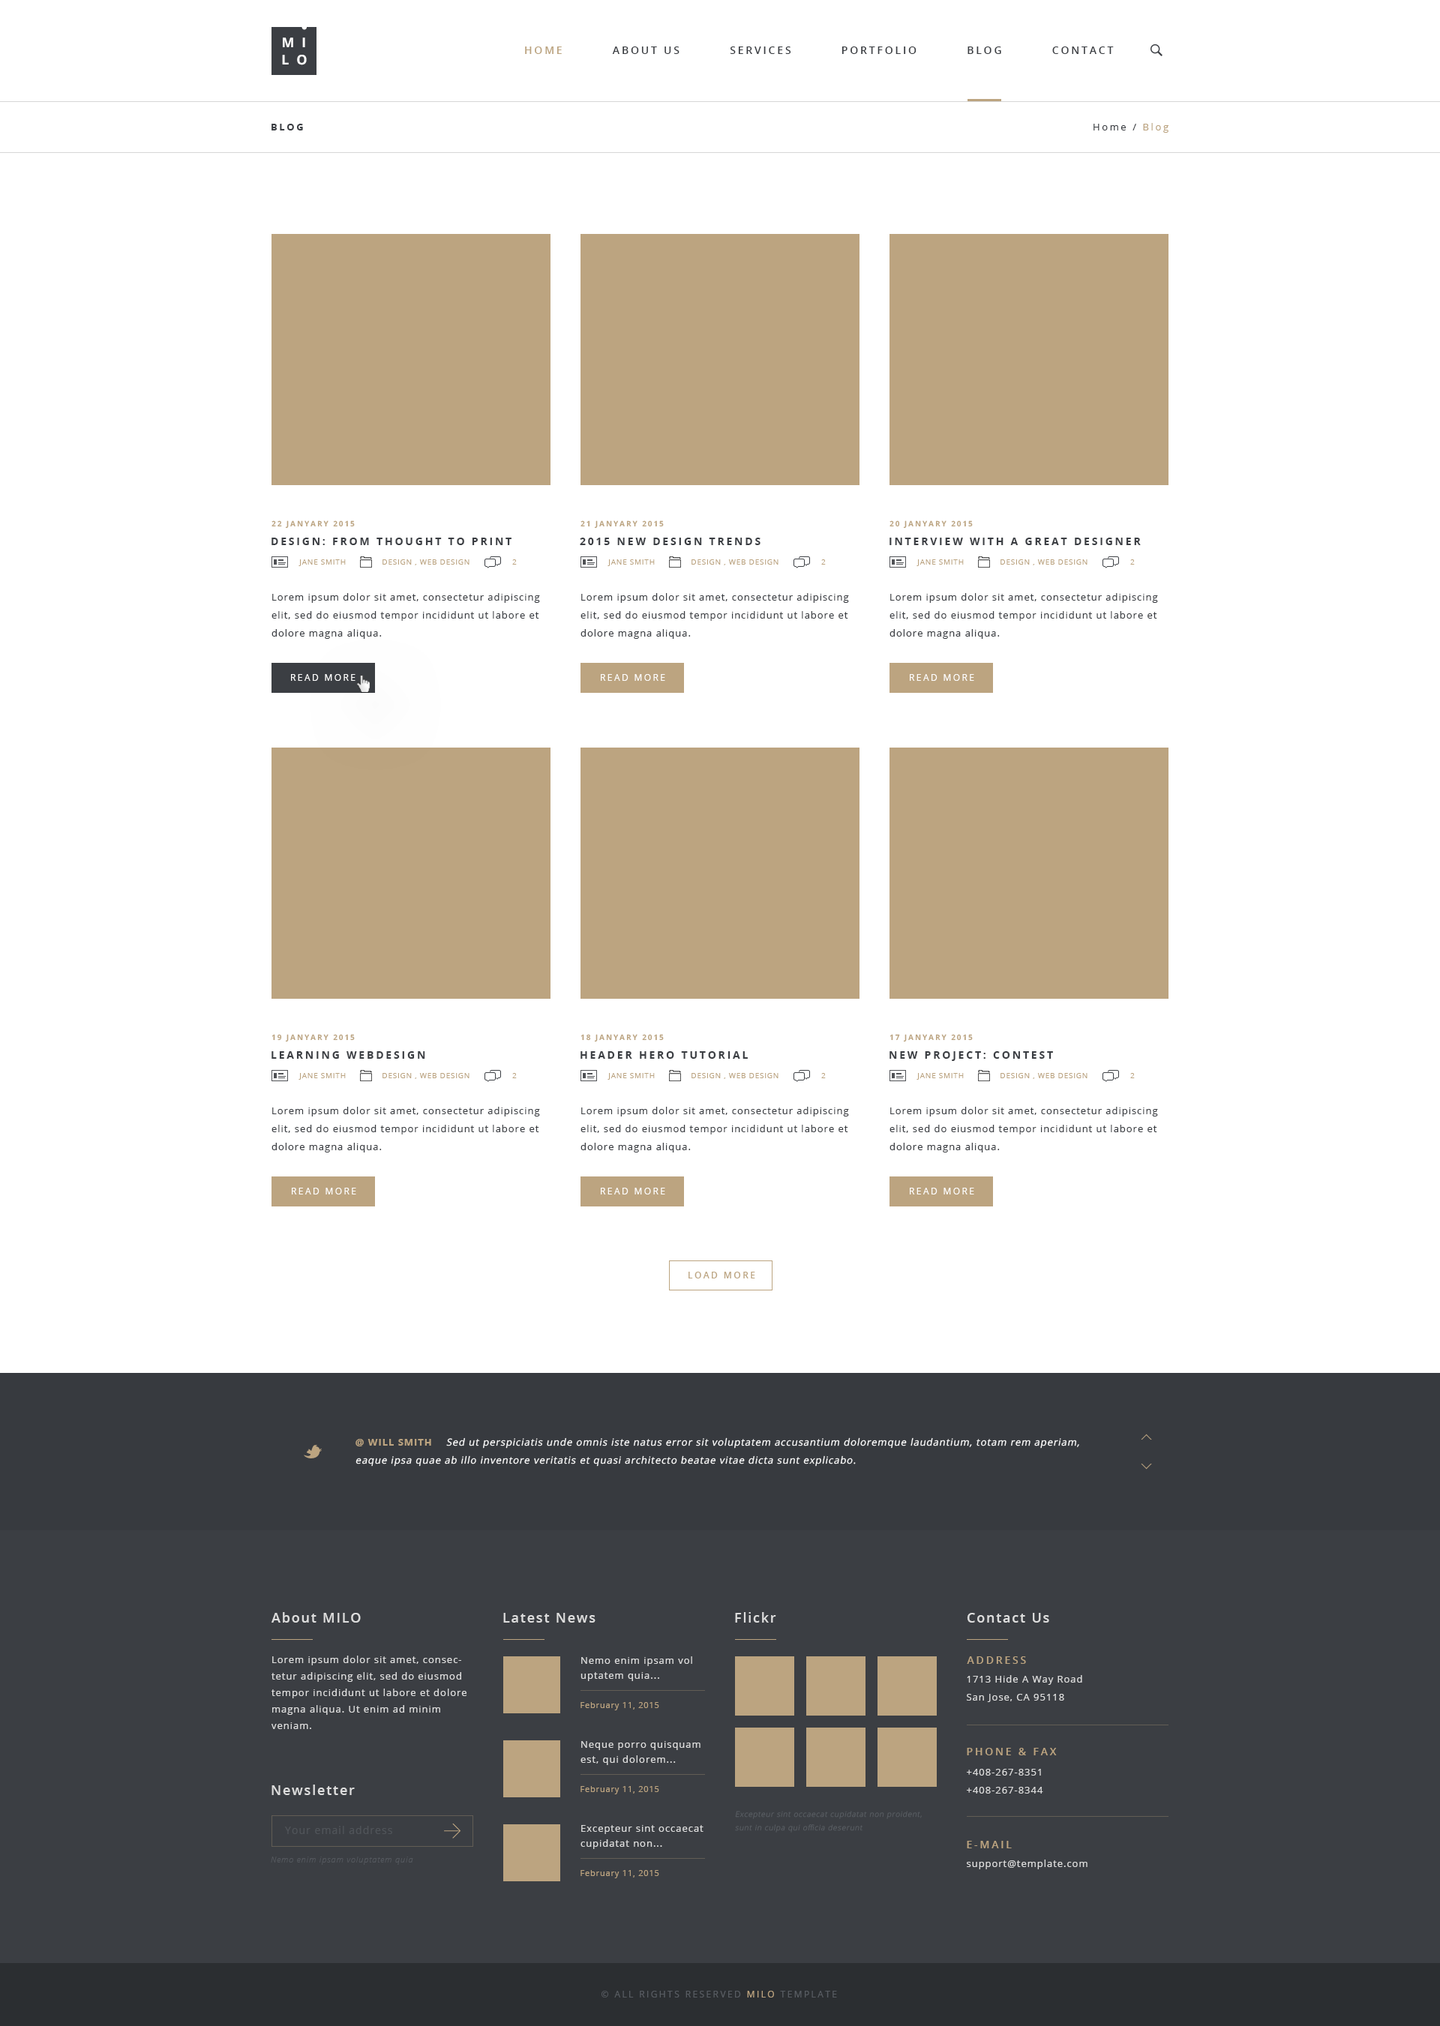
<style>
.page{position:relative;width:1440px;height:2026px;background:#ffffff}
.page>*{position:absolute;margin:0}
.t1{font:13.5px "OpenSans-Bold";letter-spacing:0.55em;color:#ffffff;text-transform:uppercase}
.t2{font:10.5px "OpenSans-Semibold";letter-spacing:0.2em;color:#3b3e43;text-transform:uppercase}
.t3{font:10.5px "OpenSans-Semibold";letter-spacing:0.2em;color:#bca480;text-transform:uppercase}
.t4{font:9.8px "OpenSans-Bold";letter-spacing:0.2em;color:#3b3e43;text-transform:uppercase}
.t5{font:9.8px "OpenSans";letter-spacing:0.2em;color:#3b3e43}
.t6{font:9.8px "OpenSans";letter-spacing:0.2em;color:#bca480}
.t7{font:7.5px "OpenSans-Bold";letter-spacing:0.2em;color:#bca480;text-transform:uppercase}
.t8{font:10.5px "OpenSans-Bold";letter-spacing:0.2em;color:#3b3e43;text-transform:uppercase}
.t9{font:7.5px "OpenSans";letter-spacing:0.075em;color:#bca480;text-transform:uppercase}
.t10{font:7.5px "OpenSans";letter-spacing:0.075em;color:#3b3e43;text-transform:uppercase}
.t11{font:7.5px "OpenSans";letter-spacing:0.075em;color:#bca480}
.t12{font:9px "OpenSans";letter-spacing:0.075em;color:#3b3e43}
.t13{font:9.8px/18px "OpenSans";letter-spacing:0.075em;color:#3b3e43}
.t14{font:9px "OpenSans";letter-spacing:0.2em;color:#ffffff;text-transform:uppercase}
.t15{font:9px "OpenSans-Semibold";letter-spacing:0.2em;color:#bca480;text-transform:uppercase}
.t16{font:9.8px/18px "OpenSans";letter-spacing:0.075em;color:#ffffff;font-style:italic}
.t17{font:9.8px/18px "OpenSans-Bold";letter-spacing:0.075em;color:#bca480;text-transform:uppercase}
.t18{font:13.5px "OpenSans-Semibold";letter-spacing:0.1em;color:#dddddd}
.t19{font:9.8px/16.5px "OpenSans";letter-spacing:0.075em;color:#dddddd}
.t20{font:9.8px/15px "OpenSans";letter-spacing:0.075em;color:#dddddd}
.t21{font:9.8px/18px "OpenSans";letter-spacing:0.075em;color:#dddddd}
.t22{font:8.2px "OpenSans";letter-spacing:0.075em;color:#bca480}
.t23{font:9.8px/18px "OpenSans-Semibold";letter-spacing:0.075em;color:#dddddd}
.t24{font:7.5px/13.5px "OpenSans-Light";letter-spacing:0.075em;color:#585c62;font-style:italic}
.t25{font:10.5px "OpenSans";letter-spacing:0.075em;color:#505459}
.t26{font:8.2px "OpenSansLight-Italic";letter-spacing:0.075em;color:#53575d}
.t27{font:9.8px "OpenSans";letter-spacing:0.075em;color:#dddddd}
.t28{font:9px "OpenSans";letter-spacing:0.2em;color:#585c62;text-transform:uppercase}
.t29{font:9px "OpenSans";letter-spacing:0.2em;color:#bca480;text-transform:uppercase}
</style>
<div class="page">
<p class="t1" style="left:283px;top:38px;width:22px;height:9px">mi</p>
<p class="t2" style="left:525px;top:46px;width:589px;height:8px"><span class="t3">Home          </span>About Us          Services          Portfolio          Blog          Contact</p>
<p class="t1" style="left:282px;top:55px;width:25px;height:10px">lo</p>
<p class="t4" style="left:272px;top:124px;width:31px;height:6px">blog</p>
<p class="t5" style="left:1094px;top:123px;width:74px;height:10px">Home / <span class="t6">Blog</span></p>
<p class="t7" style="left:272px;top:520px;width:83px;height:9px">22 janyary 2015</p>
<p class="t7" style="left:580px;top:520px;width:84px;height:9px">21 janyary 2015</p>
<p class="t7" style="left:890px;top:520px;width:83px;height:9px">20 janyary 2015</p>
<p class="t8" style="left:272px;top:538px;width:240px;height:7px">Design: from thought to print</p>
<p class="t8" style="left:580px;top:538px;width:180px;height:7px">2015 new design trends</p>
<p class="t8" style="left:890px;top:538px;width:251px;height:7px">interview with a great designer</p>
<p class="t9" style="left:298px;top:560px;width:48px;height:6px"><span class="t10"> </span>Jane Smith</p>
<p class="t9" style="left:382px;top:560px;width:88px;height:6px"><span class="t10"> </span>Design , Web Design</p>
<p class="t11" style="left:512px;top:560px;width:5px;height:5px"><span class="t12"> </span>2</p>
<p class="t9" style="left:608px;top:560px;width:47px;height:6px"><span class="t10"> </span>Jane Smith</p>
<p class="t9" style="left:692px;top:560px;width:86px;height:6px"><span class="t10"> </span>Design , Web Design</p>
<p class="t11" style="left:821px;top:560px;width:5px;height:5px"><span class="t12"> </span>2</p>
<p class="t9" style="left:916px;top:560px;width:48px;height:6px"><span class="t10"> </span>Jane Smith</p>
<p class="t9" style="left:1000px;top:560px;width:88px;height:6px"><span class="t10"> </span>Design , Web Design</p>
<p class="t11" style="left:1130px;top:560px;width:5px;height:5px"><span class="t12"> </span>2</p>
<p class="t13" style="left:272px;top:593px;width:268px;height:46px">Lorem ipsum dolor sit amet, consectetur adipiscing elit, sed do eiusmod tempor incididunt ut labore et dolore magna aliqua.</p>
<p class="t13" style="left:580px;top:593px;width:269px;height:46px">Lorem ipsum dolor sit amet, consectetur adipiscing elit, sed do eiusmod tempor incididunt ut labore et dolore magna aliqua.</p>
<p class="t13" style="left:890px;top:593px;width:268px;height:46px">Lorem ipsum dolor sit amet, consectetur adipiscing elit, sed do eiusmod tempor incididunt ut labore et dolore magna aliqua.</p>
<p class="t14" style="left:291px;top:674px;width:65px;height:7px">Read more</p>
<p class="t14" style="left:601px;top:674px;width:64px;height:7px">Read more</p>
<p class="t14" style="left:910px;top:674px;width:64px;height:7px">Read more</p>
<p class="t7" style="left:272px;top:1034px;width:83px;height:8px">19 janyary 2015</p>
<p class="t7" style="left:580px;top:1034px;width:84px;height:8px">18 janyary 2015</p>
<p class="t7" style="left:890px;top:1034px;width:83px;height:8px">17 janyary 2015</p>
<p class="t8" style="left:272px;top:1052px;width:153px;height:7px">learning webdesign</p>
<p class="t8" style="left:580px;top:1052px;width:168px;height:7px">header hero tutorial</p>
<p class="t8" style="left:890px;top:1052px;width:163px;height:9px">new project: contest</p>
<p class="t9" style="left:298px;top:1073px;width:48px;height:7px"><span class="t10"> </span>Jane Smith</p>
<p class="t9" style="left:382px;top:1073px;width:88px;height:6px"><span class="t10"> </span>Design , Web Design</p>
<p class="t11" style="left:512px;top:1073px;width:5px;height:5px"><span class="t12"> </span>2</p>
<p class="t9" style="left:608px;top:1073px;width:47px;height:7px"><span class="t10"> </span>Jane Smith</p>
<p class="t9" style="left:692px;top:1073px;width:86px;height:6px"><span class="t10"> </span>Design , Web Design</p>
<p class="t11" style="left:821px;top:1073px;width:5px;height:5px"><span class="t12"> </span>2</p>
<p class="t9" style="left:916px;top:1073px;width:48px;height:7px"><span class="t10"> </span>Jane Smith</p>
<p class="t9" style="left:1000px;top:1073px;width:88px;height:6px"><span class="t10"> </span>Design , Web Design</p>
<p class="t11" style="left:1130px;top:1073px;width:5px;height:5px"><span class="t12"> </span>2</p>
<p class="t13" style="left:272px;top:1107px;width:268px;height:46px">Lorem ipsum dolor sit amet, consectetur adipiscing elit, sed do eiusmod tempor incididunt ut labore et dolore magna aliqua.</p>
<p class="t13" style="left:580px;top:1107px;width:269px;height:46px">Lorem ipsum dolor sit amet, consectetur adipiscing elit, sed do eiusmod tempor incididunt ut labore et dolore magna aliqua.</p>
<p class="t13" style="left:890px;top:1107px;width:268px;height:46px">Lorem ipsum dolor sit amet, consectetur adipiscing elit, sed do eiusmod tempor incididunt ut labore et dolore magna aliqua.</p>
<p class="t14" style="left:292px;top:1188px;width:64px;height:7px">Read more</p>
<p class="t14" style="left:601px;top:1188px;width:64px;height:7px">Read more</p>
<p class="t14" style="left:910px;top:1188px;width:64px;height:7px">Read more</p>
<p class="t15" style="left:688px;top:1272px;width:67px;height:7px">load more</p>
<p class="t16" style="left:356px;top:1438px;width:723px;height:29px"><span class="t17">@ Will Smith     </span>Sed ut perspiciatis unde omnis iste natus error sit voluptatem accusantium doloremque laudantium, totam rem aperiam, eaque ipsa quae ab illo inventore veritatis et quasi architecto beatae vitae dicta sunt explicabo.</p>
<p class="t18" style="left:272px;top:1612px;width:89px;height:11px">About MILO</p>
<p class="t18" style="left:503px;top:1613px;width:93px;height:10px">Latest News</p>
<p class="t18" style="left:735px;top:1612px;width:41px;height:11px">Flickr</p>
<p class="t18" style="left:967px;top:1613px;width:82px;height:10px">Contact Us</p>
<p class="t19" style="left:272px;top:1656px;width:194px;height:74px">Lorem ipsum dolor sit amet, consectetur adipiscing elit, sed do eiusmod tempor incididunt ut labore et dolore magna aliqua. Ut enim ad minim veniam.</p>
<p class="t20" style="left:580px;top:1657px;width:112px;height:25px">Nemo enim ipsam vol uptatem quia...</p>
<p class="t3" style="left:967px;top:1657px;width:59px;height:7px">Address</p>
<p class="t21" style="left:967px;top:1676px;width:115px;height:26px">1713 Hide A Way Road<br>San Jose, CA 95118</p>
<p class="t22" style="left:580px;top:1702px;width:79px;height:9px">February 11, 2015</p>
<p class="t20" style="left:580px;top:1742px;width:120px;height:24px">Neque porro quisquam est, qui dolorem...</p>
<p class="t3" style="left:967px;top:1748px;width:90px;height:8px">Phone &amp; Fax</p>
<p class="t21" style="left:967px;top:1769px;width:76px;height:25px"><span class="t23"><br></span>+408-267-8351<br>+408-267-8344</p>
<p class="t18" style="left:272px;top:1785px;width:83px;height:11px">Newsletter</p>
<p class="t22" style="left:580px;top:1786px;width:79px;height:9px">February 11, 2015</p>
<p class="t24" style="left:735px;top:1811px;width:187px;height:22px">Excepteur sint occaecat cupidatat non proident, sunt in culpa qui officia deserunt</p>
<p class="t25" style="left:285px;top:1826px;width:107px;height:8px">Your email address</p>
<p class="t20" style="left:580px;top:1826px;width:124px;height:24px">Excepteur sint occaecat cupidatat non...</p>
<p class="t3" style="left:967px;top:1841px;width:45px;height:8px">E-mail</p>
<p class="t26" style="left:271px;top:1857px;width:142px;height:8px">Nemo enim ipsam voluptatem quia</p>
<p class="t27" style="left:967px;top:1860px;width:121px;height:10px">support@template.com</p>
<p class="t22" style="left:580px;top:1870px;width:79px;height:9px">February 11, 2015</p>
<p class="t28" style="left:602px;top:1991px;width:235px;height:7px">© All Rights Reserved <span class="t29">MILO</span> template</p>
</div>
